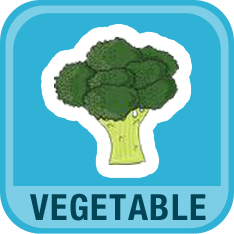
<style>
.page{position:relative;width:234px;height:234px;background:#2fb2d5}
.page>*{position:absolute;margin:0}
.t1{font:36px "HelveticaNeue-BoldCond";letter-spacing:0.04em;color:#024557}
</style>
<div class="page">
<p class="t1" style="left:30px;top:193px;width:176px;height:28px">VEGETABLE</p>
</div>
